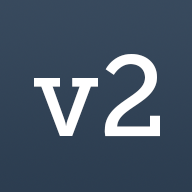
<style>
.page{position:relative;width:192px;height:192px}
.page>*{position:absolute;margin:0}
.t1{font:114.4px "MuseoSlab-500";color:#ffffff}
</style>
<div class="page">
<p class="t1" style="left:34px;top:54px;width:126px;height:83px">v2</p>
</div>
